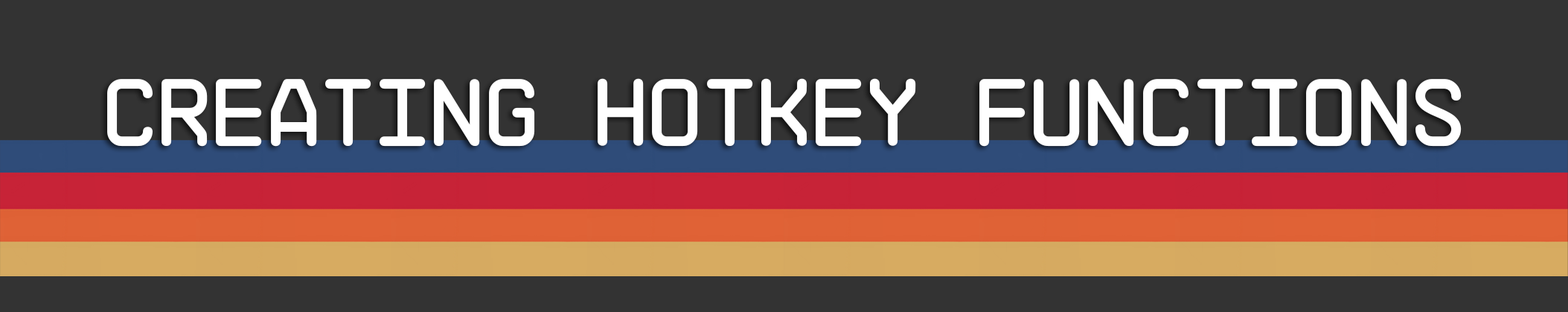
<style>
.page{position:relative;width:1568px;height:312px;background:#333333}
.page>*{position:absolute;margin:0}
.t1{font:95.3px "NB-Architekt";color:#ffffff}
</style>
<div class="page">
<p class="t1" style="left:107px;top:78px;width:1355px;height:69px">Creating hotkey Functions</p>
</div>
